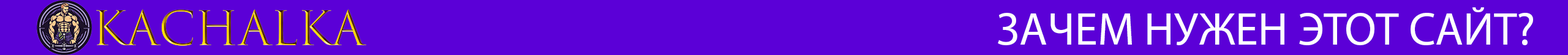
<style>
.page{position:relative;width:1568px;height:55px;background:#5b00d7}
.page>*{position:absolute;margin:0}
.t1{font:45.9px "TrajanColor-Concept"}
.t2{font:45.9px "MyriadPro-Regular";color:#ffffff}
</style>
<div class="page">
<p class="t1" style="left:96px;top:9px;width:270px;height:37px">KACHALKA</p>
<p class="t2" style="left:998px;top:7px;width:535px;height:38px">ЗАЧЕМ НУЖЕН ЭТОТ САЙТ?</p>
</div>
